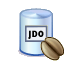
<style>
.page{position:relative;width:75px;height:66px;background:#ffffff}
.page>*{position:absolute;margin:0}
.t1{font:9px "Humanist521BT-XtraBoldCondensed";letter-spacing:0.05em;color:#000000;font-variant:small-caps}
</style>
<div class="page">
<p class="t1" style="left:28px;top:30px;width:16px;height:9px">JDO</p>
</div>
